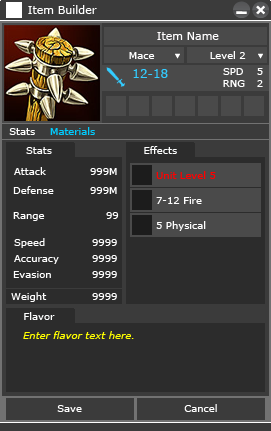
<style>
.page{position:relative;width:271px;height:431px;background:#2c2c2c}
.page>*{position:absolute;margin:0}
.t1{font:11px "Verdana";color:#ffffff}
.t2{font:11px "Verdana";color:#fffeff}
.t3{font:10px "Verdana";color:#ffffff}
.t4{font:12px "Verdana";color:#33ccff}
.t5{font:10px "Verdana";color:#00ccff}
.t6{font:10px "Verdana";color:#feffff}
.t7{font:10px "Verdana";color:#ff0000}
.t8{font:10px "Verdana-Italic";color:#ffff00}
</style>
<div class="page">
<p class="t1" style="left:28px;top:5px;width:69px;height:9px">Item Builder</p>
<p class="t2" style="left:157px;top:32px;width:62px;height:8px">Item Name</p>
<p class="t3" style="left:129px;top:52px;width:26px;height:7px">Mace</p>
<p class="t3" style="left:210px;top:51px;width:36px;height:8px">Level 2</p>
<p class="t4" style="left:133px;top:69px;width:35px;height:9px">12-18</p>
<p class="t3" style="left:223px;top:68px;width:20px;height:7px">SPD</p>
<p class="t3" style="left:257px;top:68px;width:6px;height:7px">5</p>
<p class="t3" style="left:223px;top:80px;width:22px;height:7px">RNG</p>
<p class="t3" style="left:257px;top:80px;width:6px;height:7px">2</p>
<p class="t3" style="left:9px;top:128px;width:26px;height:7px">Stats</p>
<p class="t5" style="left:50px;top:127px;width:45px;height:8px">Materials</p>
<p class="t3" style="left:26px;top:147px;width:26px;height:7px">Stats</p>
<p class="t6" style="left:144px;top:146px;width:33px;height:8px">Effects</p>
<p class="t3" style="left:14px;top:167px;width:32px;height:8px">Attack</p>
<p class="t3" style="left:90px;top:168px;width:27px;height:7px">999M</p>
<p class="t7" style="left:156px;top:171px;width:60px;height:8px">Unit Level 5</p>
<p class="t3" style="left:13px;top:186px;width:41px;height:8px">Defense</p>
<p class="t3" style="left:90px;top:187px;width:27px;height:7px">999M</p>
<p class="t3" style="left:156px;top:197px;width:46px;height:7px">7-12 Fire</p>
<p class="t3" style="left:13px;top:212px;width:32px;height:9px">Range</p>
<p class="t3" style="left:106px;top:212px;width:13px;height:7px">99</p>
<p class="t3" style="left:156px;top:221px;width:50px;height:10px">5 Physical</p>
<p class="t3" style="left:14px;top:238px;width:31px;height:10px">Speed</p>
<p class="t3" style="left:92px;top:239px;width:25px;height:7px">9999</p>
<p class="t3" style="left:14px;top:255px;width:45px;height:9px">Accuracy</p>
<p class="t3" style="left:92px;top:255px;width:25px;height:7px">9999</p>
<p class="t3" style="left:13px;top:271px;width:38px;height:7px">Evasion</p>
<p class="t3" style="left:92px;top:271px;width:25px;height:7px">9999</p>
<p class="t3" style="left:11px;top:292px;width:36px;height:10px">Weight</p>
<p class="t3" style="left:92px;top:293px;width:25px;height:7px">9999</p>
<p class="t6" style="left:24px;top:312px;width:31px;height:8px">Flavor</p>
<p class="t8" style="left:23px;top:331px;width:111px;height:8px">Enter flavor text here.</p>
<p class="t3" style="left:57px;top:405px;width:25px;height:7px">Save</p>
<p class="t3" style="left:184px;top:404px;width:33px;height:8px">Cancel</p>
</div>
